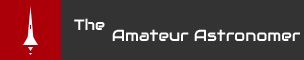
<style>
.page{position:relative;width:304px;height:60px;background:#333333}
.page>*{position:absolute;margin:0}
.t1{font:16px "Audiowide-Regular";color:#ffffff}
.t2{font:15px "Audiowide-Regular";color:#ffffff}
</style>
<div class="page">
<p class="t1" style="left:74px;top:18px;width:226px;height:23px"><span class="t2">The </span>Amateur Astronomer</p>
</div>
